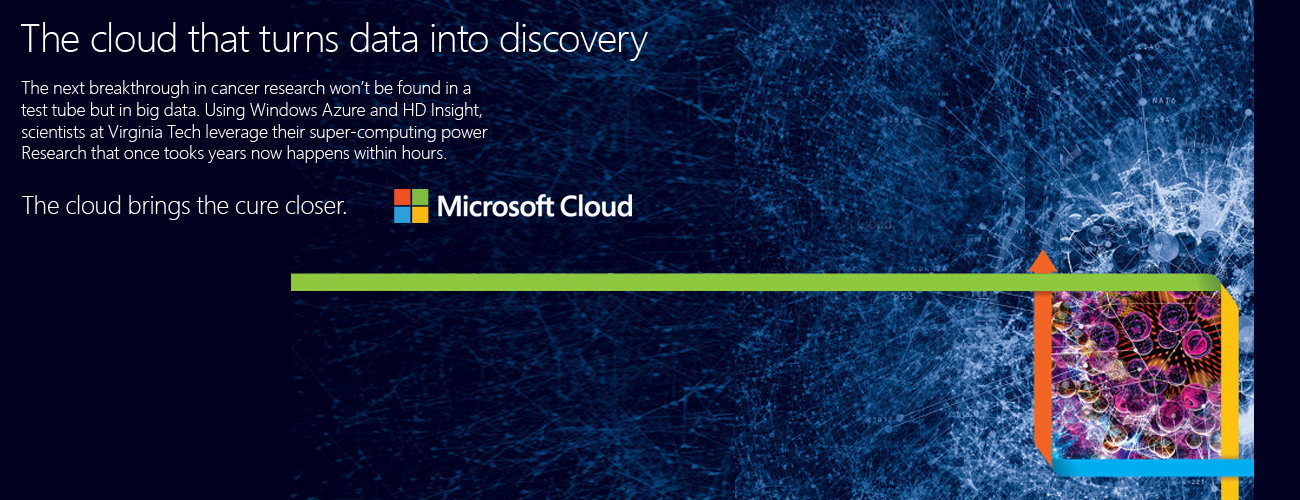
<style>
.page{position:relative;width:1300px;height:500px;background:#00011f}
.page>*{position:absolute;margin:0}
.t1{font:39.7px "SegoePro-Light";color:#ffffff}
.t2{font:18px "SegoePro-Light";color:#ffffff}
.t3{font:25px "SegoePro-Light";color:#ffffff}
</style>
<div class="page">
<p class="t1" style="left:21px;top:22px;width:627px;height:39px">The cloud that turns data into discovery</p>
<p class="t2" style="left:21px;top:80px;width:467px;height:83px">The next breakthrough in cancer research won’t be found in a<br>test tube but in big data. Using Windows Azure and HD Insight,<br>scientists at Virginia Tech leverage their super-computing power<br>Research that once tooks years now happens within hours.</p>
<p class="t3" style="left:22px;top:195px;width:324px;height:25px">The cloud brings the cure closer.</p>
</div>
